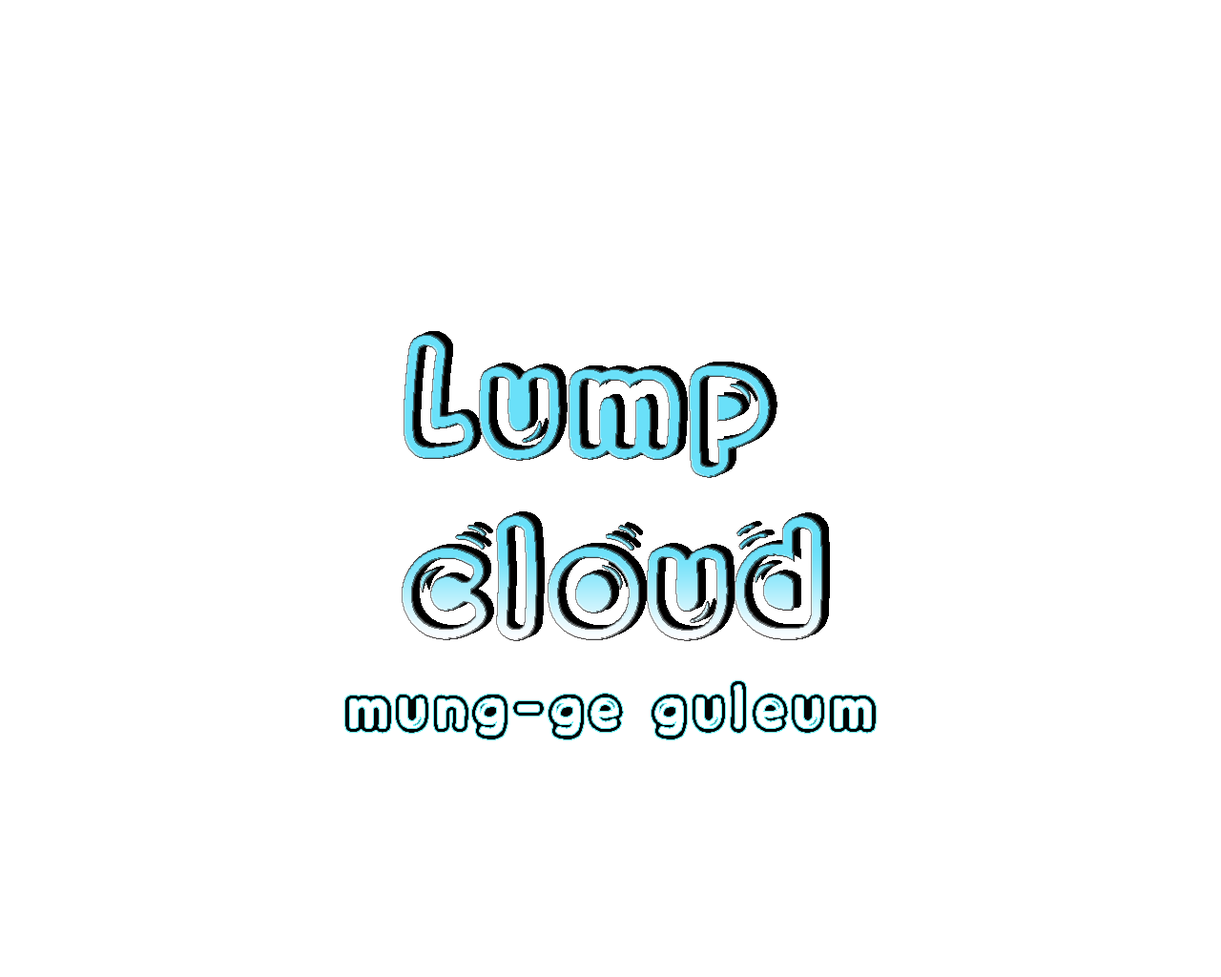
<style>
.page{position:relative;width:1221px;height:977px;background:#ffffff}
.page>*{position:absolute;margin:0}
.t1{font:150.4px "KoreanPOBIM-R"}
.t2{font:63.6px "KoreanPOBIM-R"}
</style>
<div class="page">
<p class="t1" style="left:402px;top:334px;width:421px;height:307px">Lump<br>cloud</p>
<p class="t2" style="left:344px;top:680px;width:533px;height:60px">mung-ge guleum</p>
</div>
